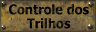
<style>
.page{position:relative;width:96px;height:32px}
.page>*{position:absolute;margin:0}
.t1{font:13.3px/14px "Tahoma-Bold";color:#000000;scale:0.95 1}
</style>
<div class="page">
<p class="t1" style="left:9px;top:4px;width:80px;height:25px;text-align:center">Controle dos<br>Trilhos</p>
</div>
